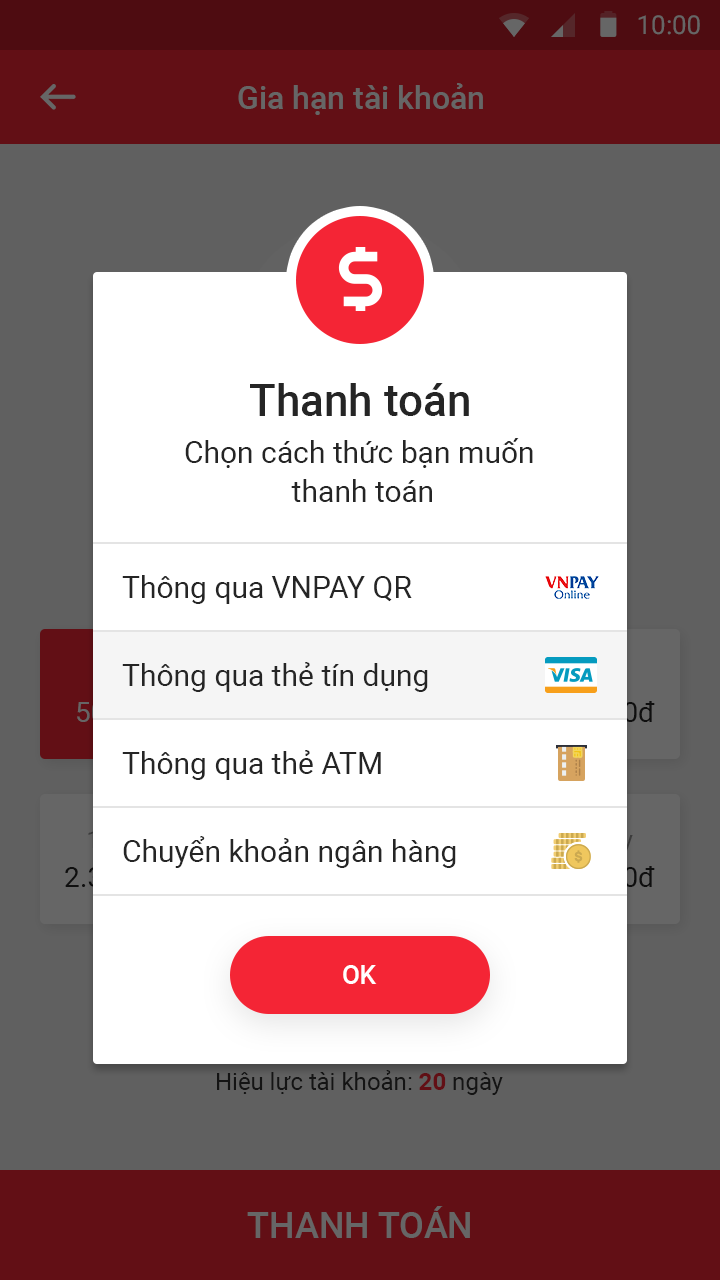
<style>
.page{position:relative;width:720px;height:1280px;background:#ffffff}
.page>*{position:absolute;margin:0}
.t1{font:44px "Roboto-Medium";color:#252525}
.t2{font:30px/39px "Roboto-Regular";color:#252525}
.t3{font:30px/88px "Roboto-Regular";color:#252525}
.t4{font:26px "Roboto-Medium";color:#ffffff;text-transform:uppercase}
</style>
<div class="page">
<p class="t1" style="left:250px;top:383px;width:219px;height:33px">Thanh toán</p>
<p class="t2" style="left:185px;top:438px;width:348px;height:64px;text-align:center">Chọn cách thức bạn muốn <br>thanh toán</p>
<p class="t3" style="left:122px;top:575px;width:334px;height:293px">Thông qua VNPAY QR<br>Thông qua thẻ tín dụng<br>Thông qua thẻ ATM<br>Chuyển khoản ngân hàng</p>
<p class="t4" style="left:343px;top:965px;width:34px;height:19px">Ok</p>
</div>
